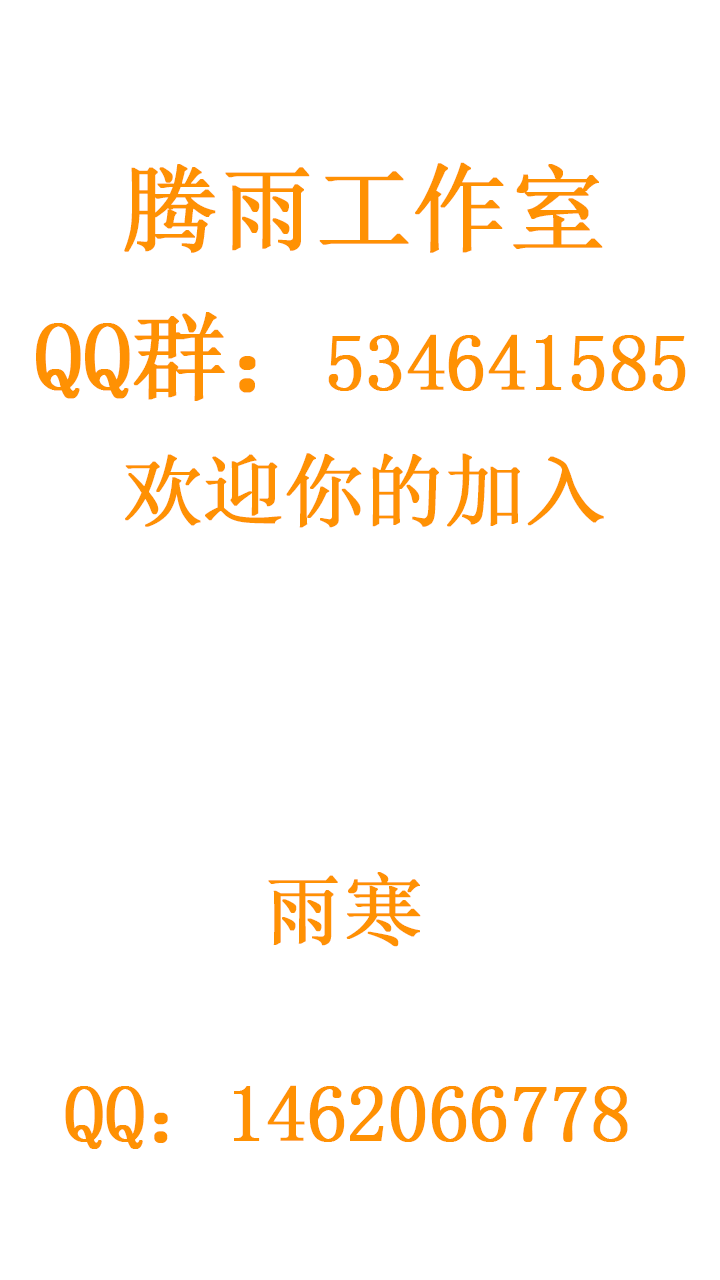
<style>
.page{position:relative;width:720px;height:1280px;background:#ffffff}
.page>*{position:absolute;margin:0}
.t1{font:96px "SimSun";letter-spacing:-0.02em;color:#ff9103;font-weight:bold}
.t2{font:80px "SimSun";letter-spacing:-0.02em;color:#ff9103;font-weight:bold}
</style>
<div class="page">
<p class="t1" style="left:124px;top:162px;width:479px;height:91px">腾雨工作室</p>
<p class="t2" style="left:36px;top:312px;width:650px;height:89px"><span class="t1">QQ群：</span>534641585</p>
<p class="t2" style="left:125px;top:453px;width:479px;height:75px">欢迎你的加入</p>
<p class="t2" style="left:268px;top:872px;width:153px;height:75px">雨寒</p>
<p class="t2" style="left:65px;top:1085px;width:563px;height:64px">QQ：1462066778</p>
</div>
